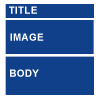
<style>
.page{position:relative;width:100px;height:100px;background:#11408b}
.page>*{position:absolute;margin:0}
.t1{font:10px "Arial-BoldMT";letter-spacing:0.025em;color:#ffffff}
</style>
<div class="page">
<p class="t1" style="left:9px;top:6px;width:28px;height:8px">TITLE</p>
<p class="t1" style="left:10px;top:33px;width:34px;height:8px">IMAGE</p>
<p class="t1" style="left:10px;top:69px;width:29px;height:8px">BODY</p>
</div>
